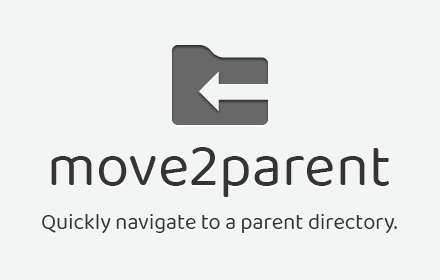
<style>
.page{position:relative;width:440px;height:280px;background:#f3f4f4}
.page>*{position:absolute;margin:0}
.t1{font:60px "BalooBhai2-Regular";color:#303030}
.t2{font:22px "BalooBhai2-Regular";color:#303030}
</style>
<div class="page">
<p class="t1" style="left:51px;top:147px;width:338px;height:50px">move2parent</p>
<p class="t2" style="left:42px;top:214px;width:355px;height:19px">Quickly navigate to a parent directory.</p>
</div>
